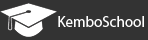
<style>
.page{position:relative;width:148px;height:40px;background:#333333}
.page>*{position:absolute;margin:0}
.t1{font:15px "MyriadPro-Regular";color:#ffffff}
</style>
<div class="page">
<p class="t1" style="left:58px;top:16px;width:86px;height:11px">KemboSchool</p>
</div>
